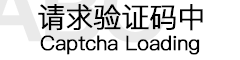
<style>
.page{position:relative;width:240px;height:60px;background:#ffffff}
.page>*{position:absolute;margin:0}
.t1{font:28px "PingFangSC-Light";letter-spacing:-0.04em;color:#000000;font-weight:bold}
.t2{font:20px "PingFangSC-Light";letter-spacing:-0.04em;color:#000000;font-weight:bold}
</style>
<div class="page">
<p class="t1" style="left:38px;top:4px;width:165px;height:27px">请求验证码中</p>
<p class="t2" style="left:40px;top:35px;width:160px;height:20px">Captcha Loading</p>
</div>
